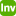
<style>
.page{position:relative;width:16px;height:16px;background:#59af00}
.page>*{position:absolute;margin:0}
.t1{font:10.6px "HelveticaNeue-Bold";color:#ffffff}
</style>
<div class="page">
<p class="t1" style="left:1px;top:3px;width:15px;height:9px">Inv</p>
</div>
